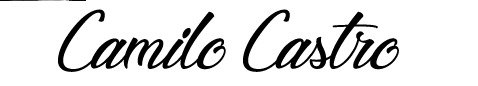
<style>
.page{position:relative;width:478px;height:86px;background:#ffffff}
.page>*{position:absolute;margin:0}
.t1{font:72px "Legendary-Hollywood";color:#000000}
</style>
<div class="page">
<p class="t1" style="left:58px;top:9px;width:341px;height:63px">Camilo Castro</p>
</div>
